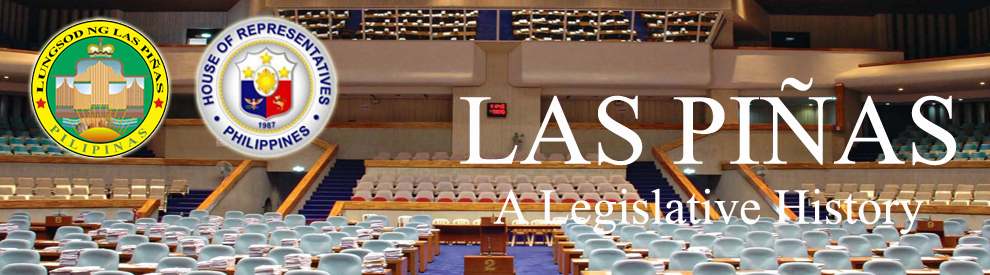
<style>
.page{position:relative;width:990px;height:275px}
.page>*{position:absolute;margin:0}
.t1{font:50px "TimesNewRomanPSMT";color:#fdfcfc}
.t2{font:100px "TimesNewRomanPSMT";color:#fdfdfd}
</style>
<div class="page">
<p class="t1" style="left:460px;top:77px;width:497px;height:158px;text-align:center"><span class="t2">LAS PIÑAS<br></span>A Legislative History</p>
</div>
